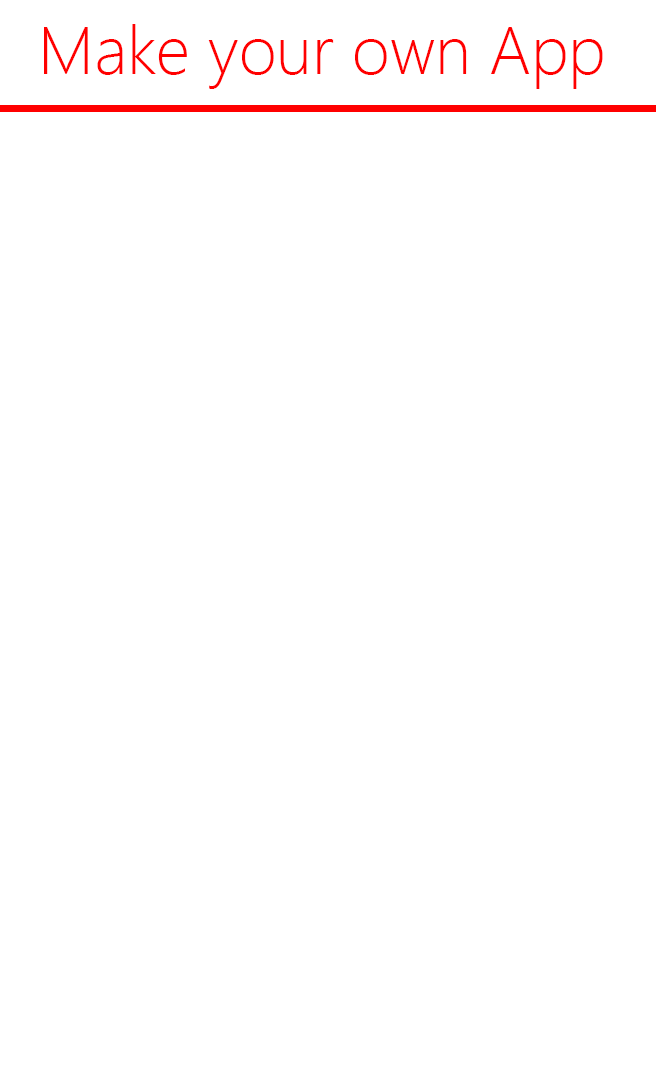
<style>
.page{position:relative;width:656px;height:1080px;background:#ffffff}
.page>*{position:absolute;margin:0}
.t1{font:66.8px "SegoeUI-Light";color:#ff0000}
</style>
<div class="page">
<p class="t1" style="left:44px;top:24px;width:559px;height:65px">Make your own App</p>
</div>
